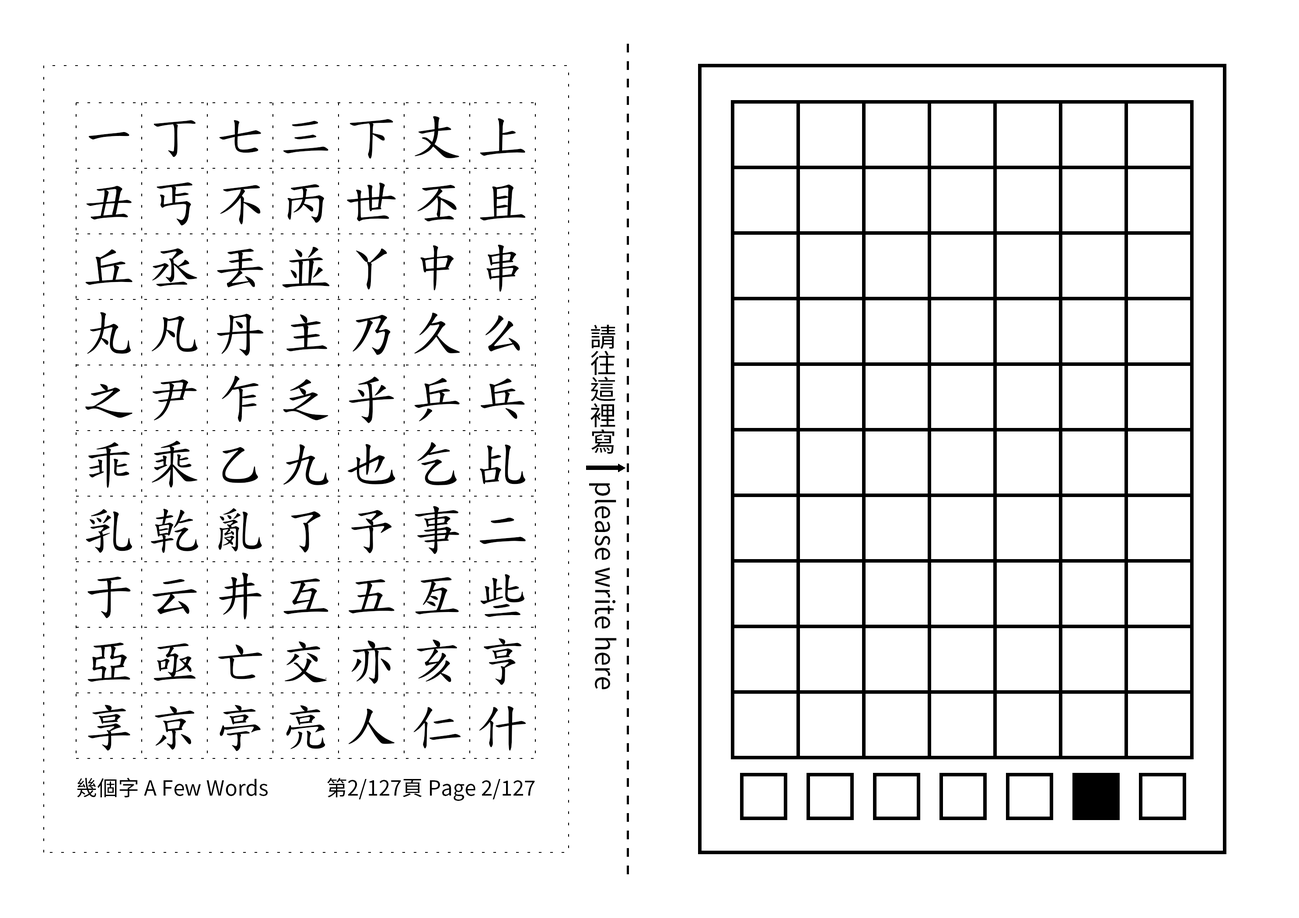
<style>
.page{position:relative;width:1299px;height:918px;background:#ffffff}
.page>*{position:absolute;margin:0}
.t1{font:52.5px/65.6px "TW-Kai-98_1";letter-spacing:0.25em;color:#000000}
.t2{font:26.2px "SourceHanSansTC-Regular";color:#000000}
.t3{font:21px "SourceHanSansTC-Regular";color:#000000}
</style>
<div class="page">
<p class="t1" style="left:85px;top:116px;width:441px;height:636px;text-align:center">一丁七三下丈上丑丐不丙世丕且丘丞丟並丫中串丸凡丹主乃久么之尹乍乏乎乒乓乖乘乙九也乞乩乳乾亂了予事二于云井互五亙些亞亟亡交亦亥亨享京亭亮人仁什</p>
<p class="t2" style="left:589px;top:324px;width:28px;height:366px;text-align:center">請往這裡寫　please write here</p>
<p class="t3" style="left:77px;top:778px;width:191px;height:20px">幾個字 A Few Words</p>
<p class="t3" style="left:327px;top:778px;width:208px;height:23px">第2/127頁 Page 2/127</p>
</div>
